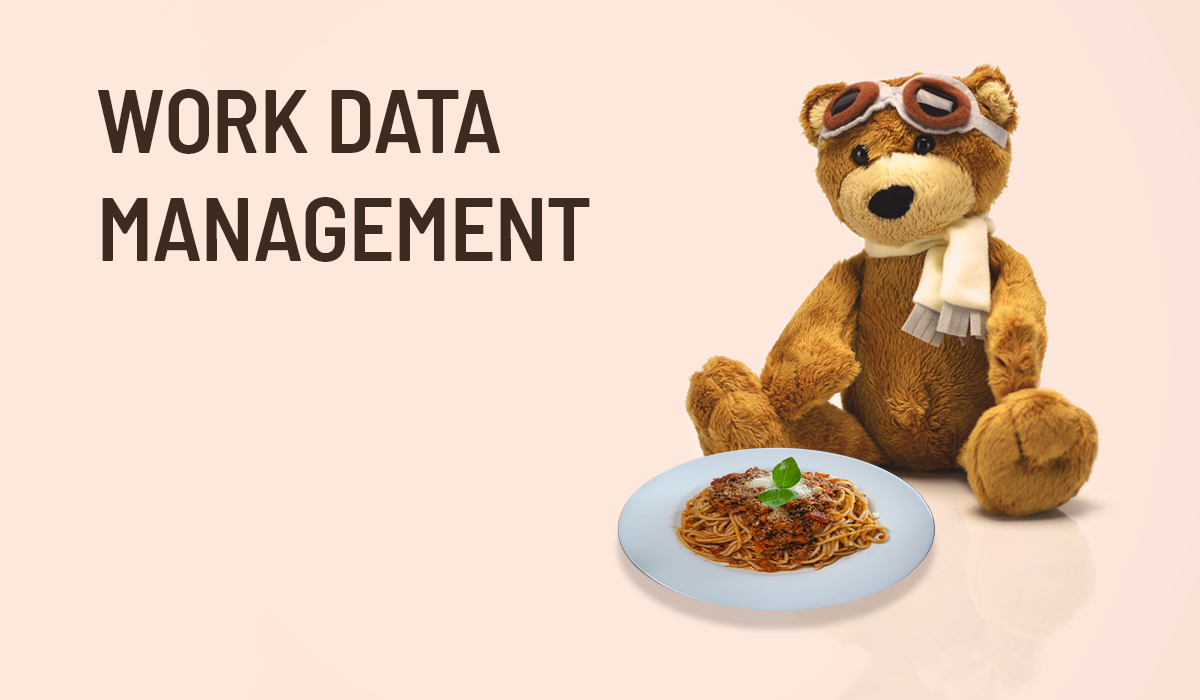
<style>
.page{position:relative;width:1200px;height:700px;background:#fee7db}
.page>*{position:absolute;margin:0}
.t1{font:90px "BarlowSemiCondensed-SemiBold";color:#3e2b20}
</style>
<div class="page">
<p class="t1" style="left:98px;top:89px;width:492px;height:173px">WORK DATA<br>MANAGEMENT</p>
</div>
